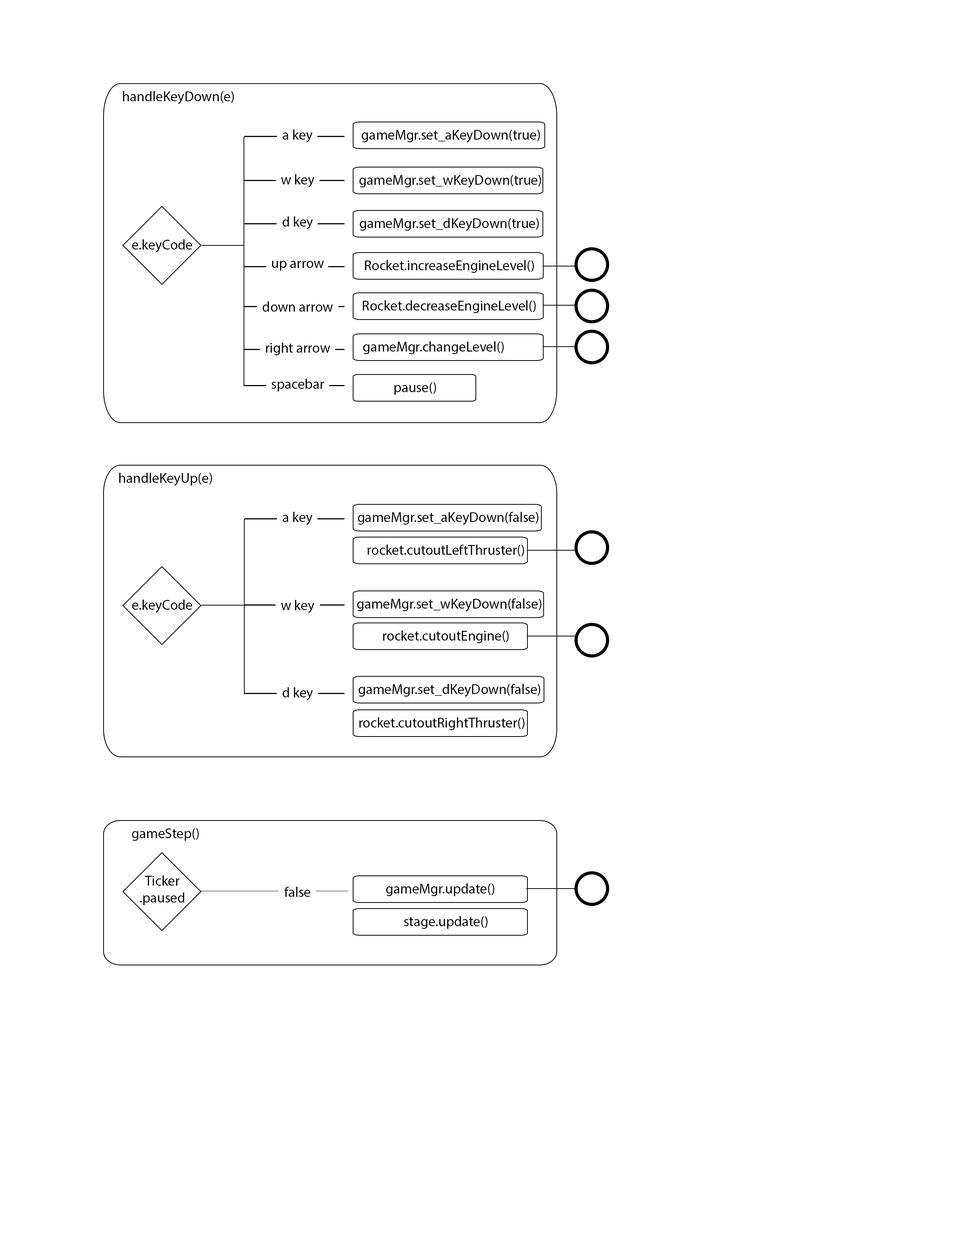
<style>
.page{position:relative;width:960px;height:1242px;background:#ffffff}
.page>*{position:absolute;margin:0}
.t1{font:14.1px "MyriadPro-Regular";color:#000000}
</style>
<div class="page">
<p class="t1" style="left:123px;top:91px;width:111px;height:13px">handleKeyDown(e)</p>
<p class="t1" style="left:283px;top:129px;width:29px;height:14px">a key</p>
<p class="t1" style="left:361px;top:129px;width:179px;height:14px">gameMgr.set_aKeyDown(true)</p>
<p class="t1" style="left:281px;top:174px;width:33px;height:13px">w key</p>
<p class="t1" style="left:359px;top:175px;width:182px;height:13px">gameMgr.set_wKeyDown(true)</p>
<p class="t1" style="left:282px;top:216px;width:31px;height:14px">d key</p>
<p class="t1" style="left:359px;top:218px;width:180px;height:13px">gameMgr.set_dKeyDown(true)</p>
<p class="t1" style="left:132px;top:239px;width:60px;height:14px">e.keyCode</p>
<p class="t1" style="left:272px;top:261px;width:52px;height:10px">up arrow</p>
<p class="t1" style="left:365px;top:260px;width:169px;height:13px">Rocket.increaseEngineLevel()</p>
<p class="t1" style="left:262px;top:302px;width:71px;height:10px">down arrow</p>
<p class="t1" style="left:363px;top:300px;width:173px;height:13px">Rocket.decreaseEngineLevel()</p>
<p class="t1" style="left:363px;top:341px;width:141px;height:13px">gameMgr.changeLevel()</p>
<p class="t1" style="left:266px;top:343px;width:64px;height:12px">right arrow</p>
<p class="t1" style="left:271px;top:379px;width:53px;height:12px">spacebar</p>
<p class="t1" style="left:394px;top:382px;width:42px;height:13px">pause()</p>
<p class="t1" style="left:119px;top:473px;width:93px;height:13px">handleKeyUp(e)</p>
<p class="t1" style="left:283px;top:512px;width:29px;height:13px">a key</p>
<p class="t1" style="left:358px;top:512px;width:180px;height:13px">gameMgr.set_aKeyDown(false)</p>
<p class="t1" style="left:367px;top:545px;width:157px;height:11px">rocket.cutoutLeftThruster()</p>
<p class="t1" style="left:132px;top:600px;width:60px;height:13px">e.keyCode</p>
<p class="t1" style="left:281px;top:600px;width:33px;height:13px">w key</p>
<p class="t1" style="left:357px;top:599px;width:184px;height:13px">gameMgr.set_wKeyDown(false)</p>
<p class="t1" style="left:383px;top:631px;width:126px;height:12px">rocket.cutoutEngine()</p>
<p class="t1" style="left:282px;top:687px;width:31px;height:14px">d key</p>
<p class="t1" style="left:358px;top:684px;width:182px;height:13px">gameMgr.set_dKeyDown(false)</p>
<p class="t1" style="left:359px;top:717px;width:165px;height:13px">rocket.cutoutRightThruster()</p>
<p class="t1" style="left:132px;top:828px;width:67px;height:13px">gameStep()</p>
<p class="t1" style="left:140px;top:876px;width:44px;height:29px;text-align:center">Ticker<br>.paused</p>
<p class="t1" style="left:284px;top:887px;width:27px;height:10px">false</p>
<p class="t1" style="left:386px;top:883px;width:108px;height:13px">gameMgr.update()</p>
<p class="t1" style="left:404px;top:916px;width:83px;height:13px">stage.update()</p>
</div>
